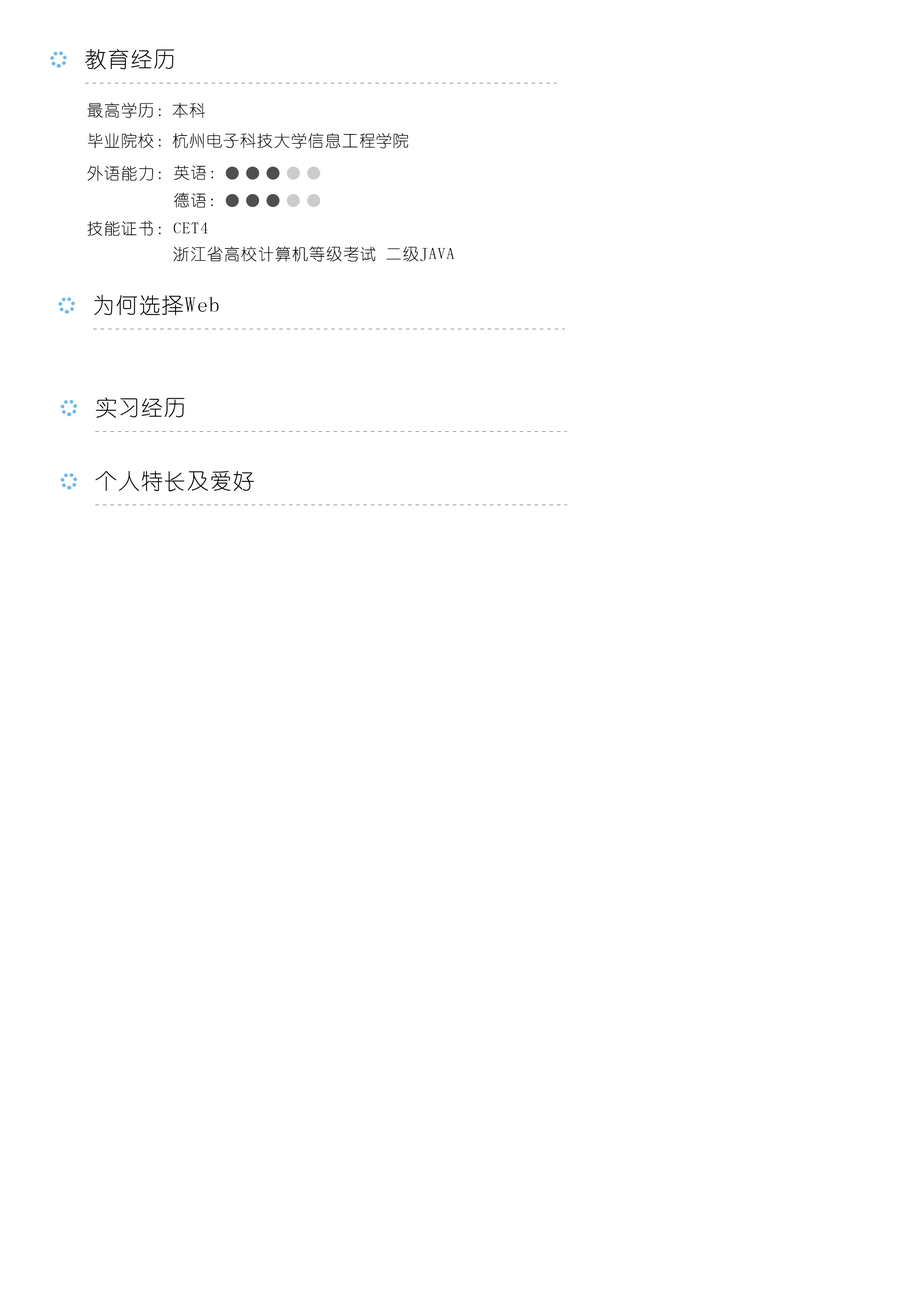
<style>
.page{position:relative;width:918px;height:1299px;background:#ffffff}
.page>*{position:absolute;margin:0}
.t1{font:21.9px "YouYuan";letter-spacing:0.05em;color:#000000}
.t2{font:16.2px "YouYuan";letter-spacing:0.05em;color:#000000}
</style>
<div class="page">
<p class="t1" style="left:85px;top:49px;width:89px;height:21px">教育经历</p>
<p class="t2" style="left:87px;top:103px;width:118px;height:15px">最高学历：本科</p>
<p class="t2" style="left:88px;top:133px;width:320px;height:15px">毕业院校：杭州电子科技大学信息工程学院</p>
<p class="t2" style="left:87px;top:165px;width:74px;height:16px">外语能力：</p>
<p class="t2" style="left:174px;top:165px;width:39px;height:15px">英语：</p>
<p class="t2" style="left:174px;top:193px;width:39px;height:15px">德语：</p>
<p class="t2" style="left:87px;top:221px;width:74px;height:15px">技能证书：</p>
<p class="t2" style="left:174px;top:222px;width:34px;height:12px">CET4</p>
<p class="t2" style="left:174px;top:246px;width:280px;height:16px">浙江省高校计算机等级考试 二级JAVA</p>
<p class="t1" style="left:94px;top:295px;width:125px;height:20px">为何选择Web</p>
<p class="t1" style="left:96px;top:397px;width:89px;height:21px">实习经历</p>
<p class="t1" style="left:96px;top:471px;width:158px;height:20px">个人特长及爱好</p>
</div>
